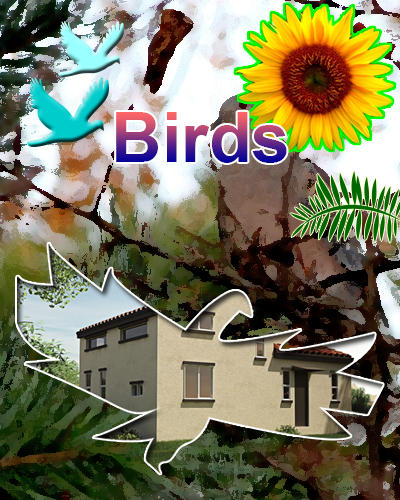
<style>
.page{position:relative;width:400px;height:500px}
.page>*{position:absolute;margin:0}
.t1{font:70px "Arial-BoldMT"}
</style>
<div class="page">
<p class="t1" style="left:116px;top:112px;width:171px;height:51px">Birds</p>
</div>
